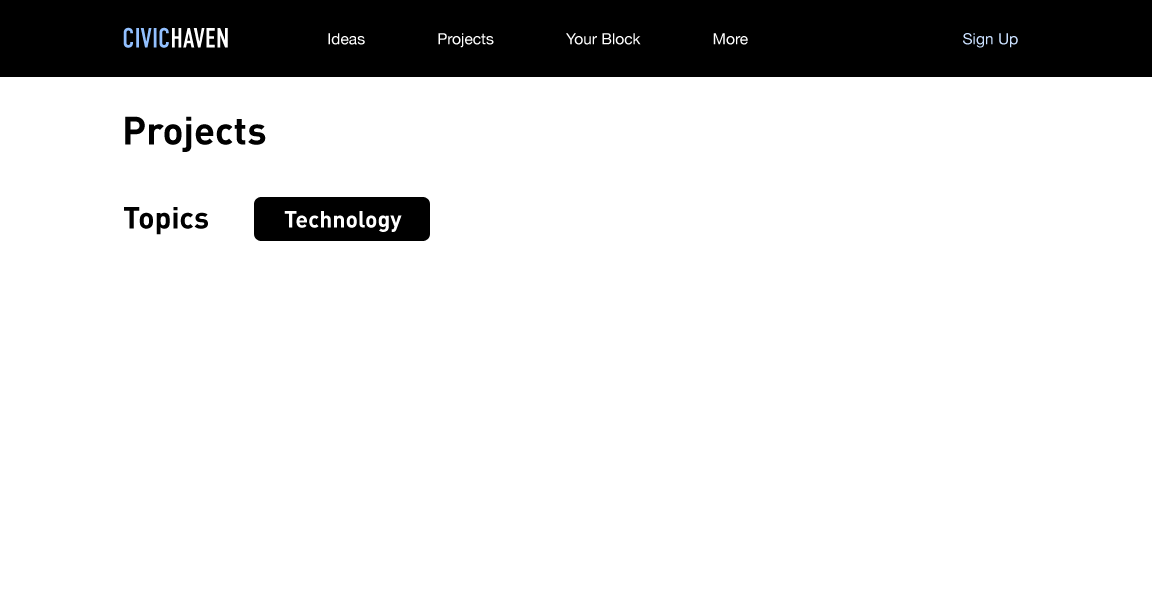
<style>
.page{position:relative;width:1152px;height:600px;background:#ffffff}
.page>*{position:absolute;margin:0}
.t1{font:28px "DINCondensedC";color:#92c0ff}
.t2{font:28px "DINCondensedC";color:#ffffff}
.t3{font:15.5px "HelveticaNeue";color:#fefefe}
.t4{font:15.5px "HelveticaNeue";color:#cae0ff}
.t5{font:38.5px "DIN-Bold";color:#000000}
.t6{font:30px "DIN-Bold";color:#000000}
.t7{font:23px "DIN-Bold";color:#ffffff}
</style>
<div class="page">
<p class="t1" style="left:123px;top:27px;width:105px;height:21px">CIVIC<span class="t2">HAVEN</span></p>
<p class="t3" style="left:328px;top:33px;width:37px;height:12px">Ideas</p>
<p class="t3" style="left:438px;top:33px;width:56px;height:15px">Projects</p>
<p class="t3" style="left:566px;top:33px;width:75px;height:12px">Your Block</p>
<p class="t3" style="left:713px;top:33px;width:35px;height:12px">More</p>
<p class="t4" style="left:963px;top:33px;width:55px;height:15px">Sign Up</p>
<p class="t5" style="left:125px;top:116px;width:141px;height:36px">Projects</p>
<p class="t6" style="left:124px;top:207px;width:84px;height:28px">Topics</p>
<p class="t7" style="left:284px;top:211px;width:118px;height:21px">Technology</p>
</div>
